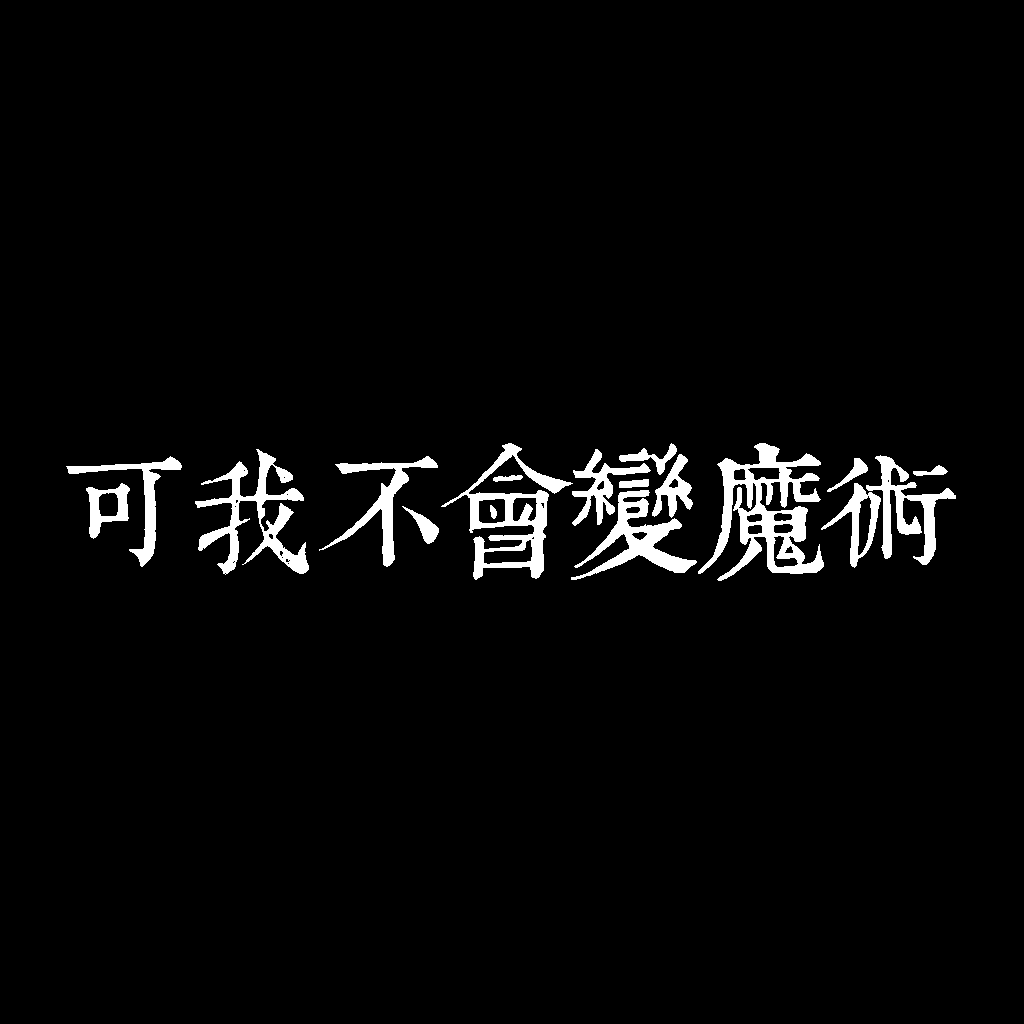
<style>
.page{position:relative;width:1024px;height:1024px;background:#000000}
.page>*{position:absolute;margin:0}
.t1{font:130px "TpldKhangXiDictTrial";letter-spacing:-0.02em;color:#ffffff}
</style>
<div class="page">
<p class="t1" style="left:66px;top:443px;width:890px;height:138px">可我不會變魔術</p>
</div>
